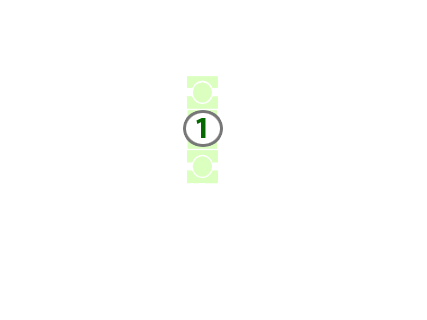
<style>
.page{position:relative;width:427px;height:320px;background:#ffffff}
.page>*{position:absolute;margin:0}
.t1{font:30px "MyriadPro-Bold";color:#066801}
</style>
<div class="page">
<p class="t1" style="left:196px;top:118px;width:10px;height:20px">1</p>
</div>
